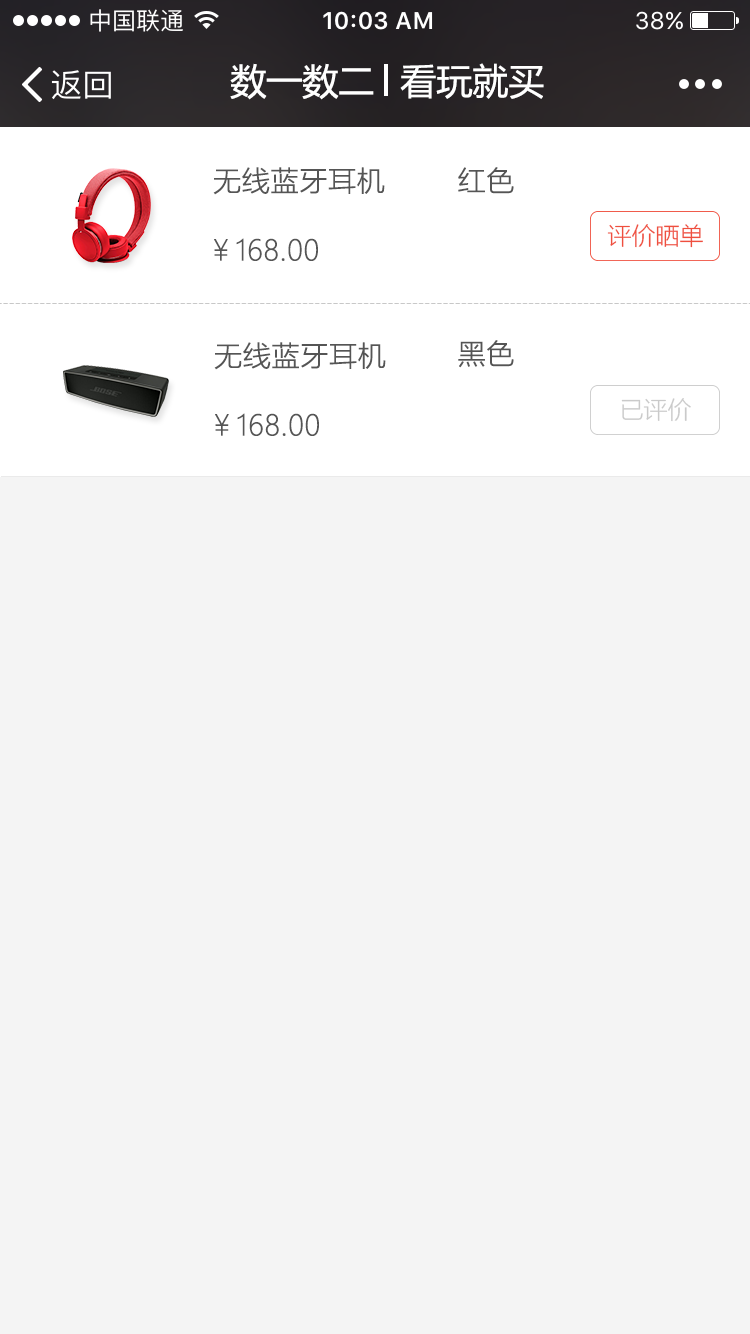
<style>
.page{position:relative;width:750px;height:1334px;background:#f4f4f4}
.page>*{position:absolute;margin:0}
.t1{font:36px "MicrosoftYaHei";color:#ffffff}
.t2{font:28px "MicrosoftYaHeiLight";color:#555555;font-weight:bold}
.t3{font:24px "MicrosoftYaHeiLight";color:#ef4f3e}
.t4{font:24px "MicrosoftYaHeiLight";color:#cacaca}
</style>
<div class="page">
<p class="t1" style="left:230px;top:63px;width:144px;height:37px">数一数二</p>
<p class="t1" style="left:400px;top:63px;width:144px;height:36px">看玩就买</p>
<p class="t2" style="left:213px;top:167px;width:172px;height:28px">无线蓝牙耳机</p>
<p class="t2" style="left:458px;top:167px;width:56px;height:27px">红色</p>
<p class="t3" style="left:607px;top:224px;width:96px;height:24px">评价晒单</p>
<p class="t2" style="left:214px;top:238px;width:104px;height:23px">￥168.00</p>
<p class="t2" style="left:214px;top:342px;width:172px;height:28px">无线蓝牙耳机</p>
<p class="t2" style="left:458px;top:340px;width:56px;height:28px">黑色</p>
<p class="t4" style="left:621px;top:398px;width:70px;height:24px">已评价</p>
<p class="t2" style="left:215px;top:413px;width:104px;height:23px">￥168.00</p>
</div>
